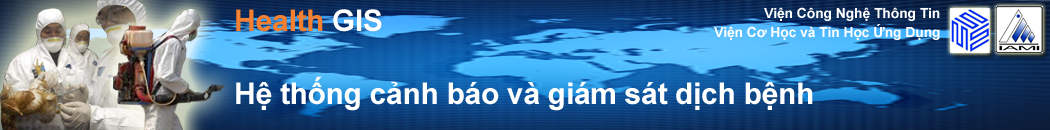
<style>
.page{position:relative;width:1050px;height:130px}
.page>*{position:absolute;margin:0}
.t1{font:30px "Arial-BoldMT";letter-spacing:-0.01em;color:#f58031}
.t2{font:30px "Arial-BoldMT";letter-spacing:-0.01em;color:#ffffff}
.t3{font:14px "Arial-BoldMT";letter-spacing:-0.01em;color:#ffffff}
</style>
<div class="page">
<p class="t1" style="left:236px;top:9px;width:146px;height:23px">Health <span class="t2">GIS</span></p>
<p class="t3" style="left:764px;top:7px;width:176px;height:14px">Viện Công Nghệ Thông Tin</p>
<p class="t3" style="left:714px;top:24px;width:226px;height:16px">Viện Cơ Học và Tin Học Ứng Dụng</p>
<p class="t2" style="left:236px;top:76px;width:577px;height:35px">Hệ thống cảnh báo và giám sát dịch bệnh</p>
</div>
